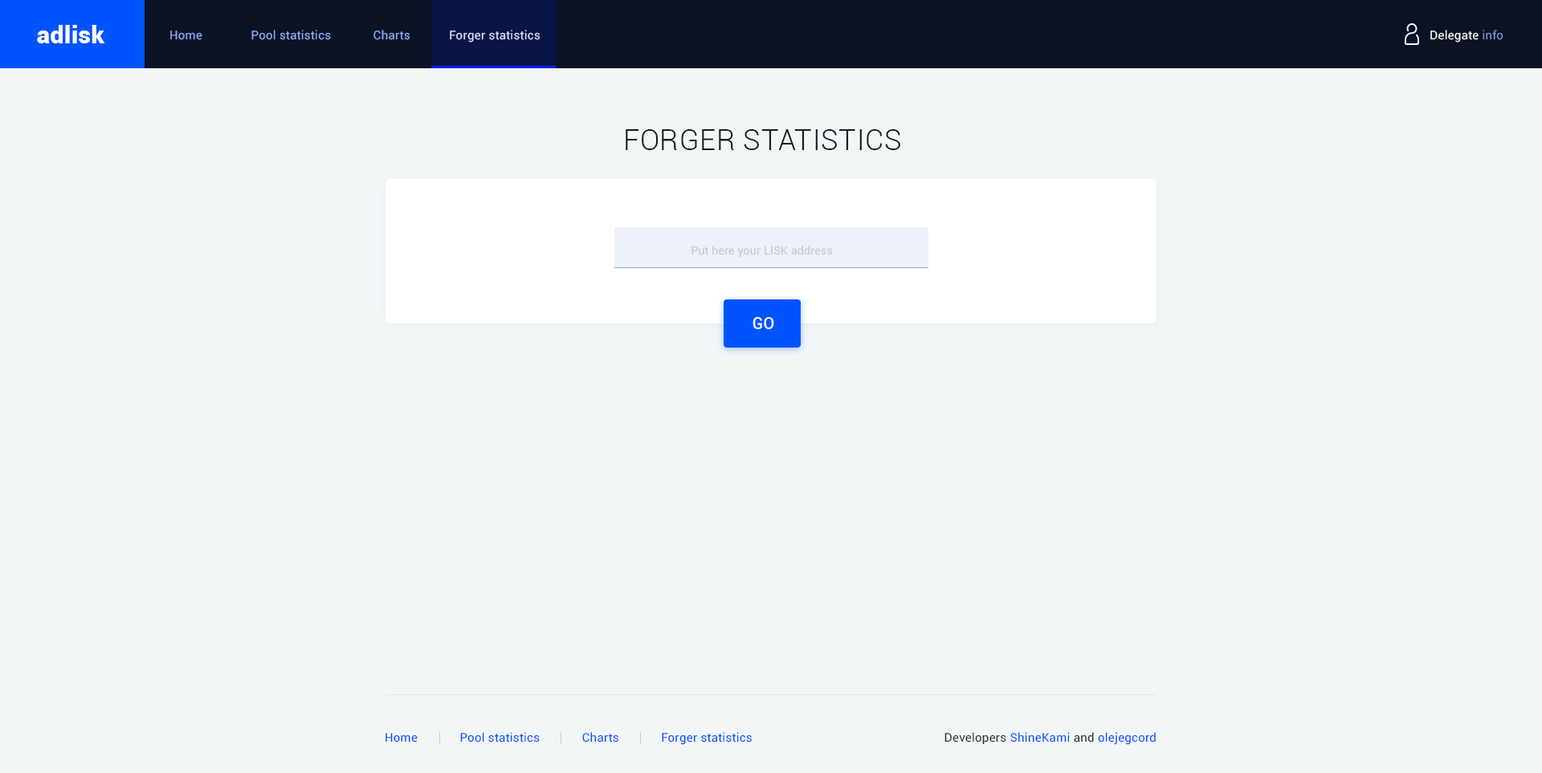
<style>
.page{position:relative;width:1542px;height:773px;background:#f3f6f7}
.page>*{position:absolute;margin:0}
.t1{font:24.1px "Roboto-Black";letter-spacing:0.02em;color:#ffffff}
.t2{font:12px "Roboto-Regular";letter-spacing:0.02em;color:#88abf0}
.t3{font:12px "Roboto-Regular";letter-spacing:0.02em;color:#ffffff}
.t4{font:12px "Roboto-Regular";letter-spacing:0.02em;color:#f3f6f7}
.t5{font:12px "Roboto-Regular";letter-spacing:0.02em;color:#7695d2}
.t6{font:28.9px "Roboto-Light";letter-spacing:0.02em;color:#191d1f;text-transform:uppercase}
.t7{font:11.2px "Roboto-Regular";letter-spacing:0.02em;color:#c2cada}
.t8{font:16.1px "Roboto-Medium";letter-spacing:0.02em;color:#f2f6f7}
.t9{font:12px "Roboto-Regular";letter-spacing:0.02em;color:#0054ff}
.t10{font:12px "Roboto-Regular";letter-spacing:0.02em;color:#263238}
</style>
<div class="page">
<p class="t1" style="left:37px;top:25px;width:68px;height:18px">adlisk</p>
<p class="t2" style="left:170px;top:30px;width:370px;height:13px">Home               Pool statistics             Charts            <span class="t3">Forger statistics</span></p>
<p class="t4" style="left:1430px;top:30px;width:73px;height:13px">Delegate <span class="t5">info</span></p>
<p class="t6" style="left:626px;top:129px;width:274px;height:21px">Forger Statistics</p>
<p class="t7" style="left:691px;top:246px;width:142px;height:12px">Put here your LISK address</p>
<p class="t8" style="left:752px;top:317px;width:22px;height:12px">GO</p>
<p class="t9" style="left:385px;top:732px;width:367px;height:13px">Home             Pool statistics             Charts             Forger statistics</p>
<p class="t10" style="left:944px;top:732px;width:212px;height:13px">Developers <span class="t9">ShineKami</span> and <span class="t9">olejegcord</span></p>
</div>
